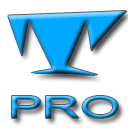
<style>
.page{position:relative;width:128px;height:128px;background:#ffffff}
.page>*{position:absolute;margin:0}
.t1{font:30px/44.8px "ArialMT";scale:1.72 1}
.t2{font:85.3px "SnapITC-Regular";scale:1.72 1}
</style>
<div class="page">
<p class="t1" style="left:8px;top:11px;width:119px;height:107px;text-align:center"><span class="t2">T<br></span>PRO</p>
</div>
